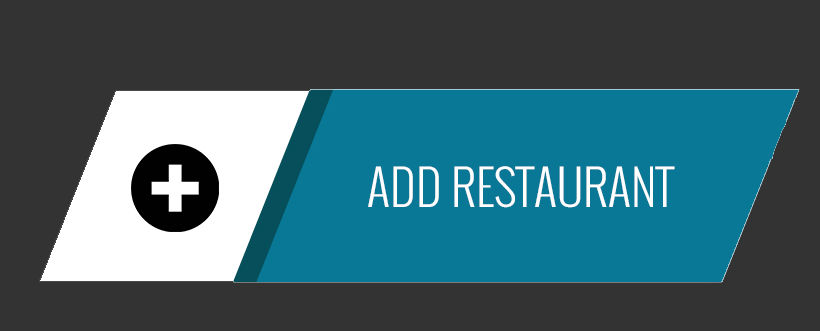
<style>
.page{position:relative;width:820px;height:331px;background:#333333}
.page>*{position:absolute;margin:0}
.t1{font:48px "Oswald-Light";color:#ffffff;text-transform:uppercase}
</style>
<div class="page">
<p class="t1" style="left:368px;top:166px;width:307px;height:42px">ADD RESTAURANT</p>
</div>
